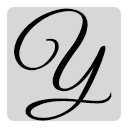
<style>
.page{position:relative;width:128px;height:128px;background:#d7d7d7}
.page>*{position:absolute;margin:0}
.t1{font:92px "GreatVibes-Regular";color:#000000}
</style>
<div class="page">
<p class="t1" style="left:14px;top:8px;width:98px;height:113px;rotate:6deg">Y</p>
</div>
